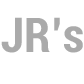
<style>
.page{position:relative;width:84px;height:84px;background:#ffffff}
.page>*{position:absolute;margin:0}
.t1{font:48px "Roboto-BoldCondensed";color:#aaaaaa}
</style>
<div class="page">
<p class="t1" style="left:1px;top:17px;width:82px;height:36px">JR’s</p>
</div>
